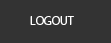
<style>
.page{position:relative;width:111px;height:43px;background:#333333}
.page>*{position:absolute;margin:0}
.t1{font:12px "MyriadPro-Regular";color:#ffffff}
</style>
<div class="page">
<p class="t1" style="left:30px;top:16px;width:44px;height:9px">LOGOUT</p>
</div>
